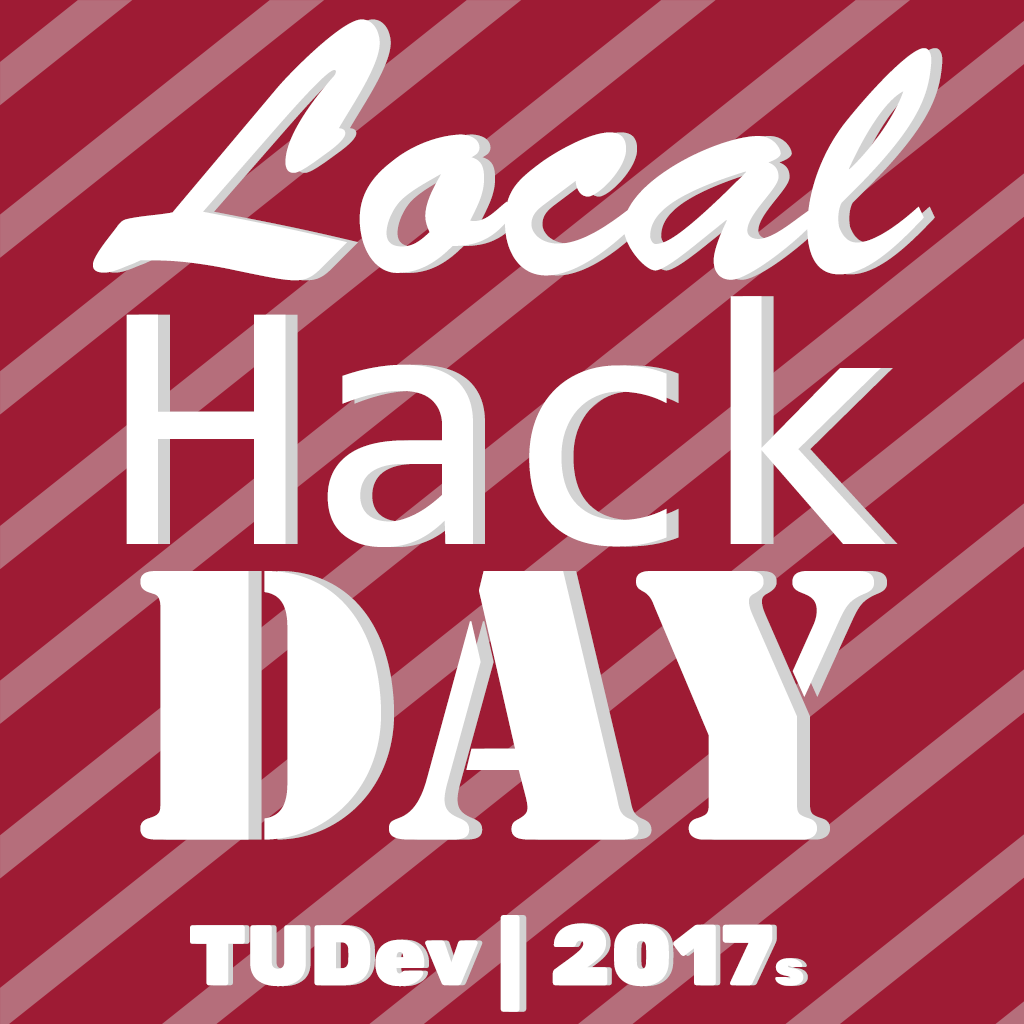
<style>
.page{position:relative;width:1024px;height:1024px;background:#9e1b34}
.page>*{position:absolute;margin:0}
.t1{font:358.7px "BrushScriptStd";color:#ffffff}
.t2{font:358.7px "Consolas";color:#ffffff}
.t3{font:358.7px "StencilStd";color:#ffffff}
.t4{font:87.5px "Rubik-Black";color:#ffffff;scale:1.13 1}
.t5{font:87.5px "Rubik-Black";scale:1.13 1}
.t6{font:85.4px "Rubik-Black";color:#ffffff}
.t7{font:86.2px "Rubik-Black";color:#ffffff}
.t8{font:50.6px "Rubik-Black";color:#ffffff}
</style>
<div class="page">
<p class="t1" style="left:93px;top:19px;width:839px;height:262px">Local</p>
<p class="t1" style="left:104px;top:19px;width:839px;height:262px">Local</p>
<p class="t2" style="left:126px;top:296px;width:760px;height:251px">Hack</p>
<p class="t2" style="left:138px;top:296px;width:760px;height:251px">Hack</p>
<p class="t3" style="left:140px;top:571px;width:734px;height:269px">Day</p>
<p class="t3" style="left:153px;top:571px;width:734px;height:269px">Day</p>
<p class="t4" style="left:500px;top:915px;width:20px;height:97px">|</p>
<p class="t5" style="left:507px;top:915px;width:20px;height:97px">|</p>
<p class="t6" style="left:190px;top:925px;width:288px;height:62px">TUDev</p>
<p class="t6" style="left:194px;top:925px;width:289px;height:62px">TUDev</p>
<p class="t7" style="left:552px;top:923px;width:252px;height:64px">2017<span class="t8">s</span></p>
<p class="t7" style="left:557px;top:923px;width:251px;height:64px">2017<span class="t8">s</span></p>
</div>
